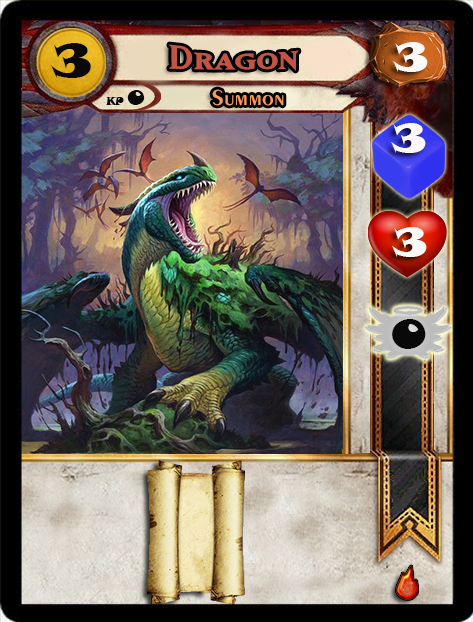
<style>
.page{position:relative;width:473px;height:622px}
.page>*{position:absolute;margin:0}
.t1{font:46.6px "SnapITC-Regular";color:#090909;scale:1.05 1}
.t2{font:40px "MatrixBoldSmallCaps";color:#c25443;scale:1.06 1}
.t3{font:40px "SnapITC-Regular";color:#fef9f9;scale:1.05 1}
.t4{font:22.7px "Exotic350BT-DemiBold";color:#f89c64;scale:1.06 1}
.t5{font:20.5px "SnapITC-Regular";color:#090909}
.t6{font:40px "SnapITC-Regular";color:#090909;scale:1.05 1}
</style>
<div class="page">
<p class="t1" style="left:51px;top:43px;width:40px;height:35px">3</p>
<p class="t2" style="left:169px;top:44px;width:130px;height:27px">Dragon</p>
<p class="t3" style="left:393px;top:42px;width:35px;height:30px">3</p>
<p class="t4" style="left:212px;top:89px;width:72px;height:17px">Summon</p>
<p class="t5" style="left:127px;top:90px;width:18px;height:15px">0</p>
<p class="t3" style="left:391px;top:123px;width:35px;height:30px">3</p>
<p class="t3" style="left:392px;top:227px;width:35px;height:30px">3</p>
<p class="t6" style="left:392px;top:319px;width:34px;height:30px">0</p>
</div>
